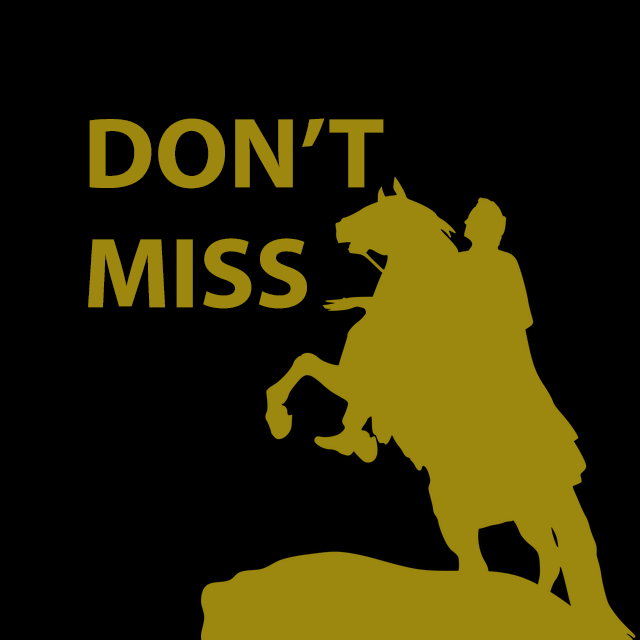
<style>
.page{position:relative;width:640px;height:640px;background:#000000}
.page>*{position:absolute;margin:0}
.t1{font:100px "MyriadPro-Bold";color:#9d870f;scale:1.03 1}
</style>
<div class="page">
<p class="t1" style="left:88px;top:118px;width:296px;height:191px">DON’T<br>MISS</p>
</div>
